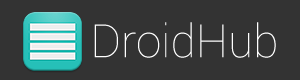
<style>
.page{position:relative;width:300px;height:80px;background:#333333}
.page>*{position:absolute;margin:0}
.t1{font:46px "Roboto-Thin";color:#ffffff}
</style>
<div class="page">
<p class="t1" style="left:94px;top:22px;width:182px;height:36px">DroidHub</p>
</div>
